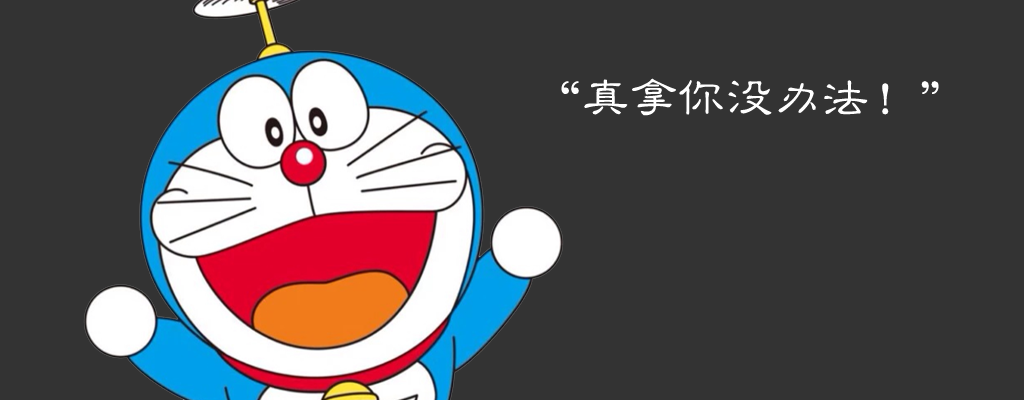
<style>
.page{position:relative;width:1024px;height:400px;background:#333333}
.page>*{position:absolute;margin:0}
.t1{font:48px "GBJenLei-Medium";color:#ffffff}
</style>
<div class="page">
<p class="t1" style="left:561px;top:78px;width:378px;height:38px">“真拿你没办法！”</p>
</div>
